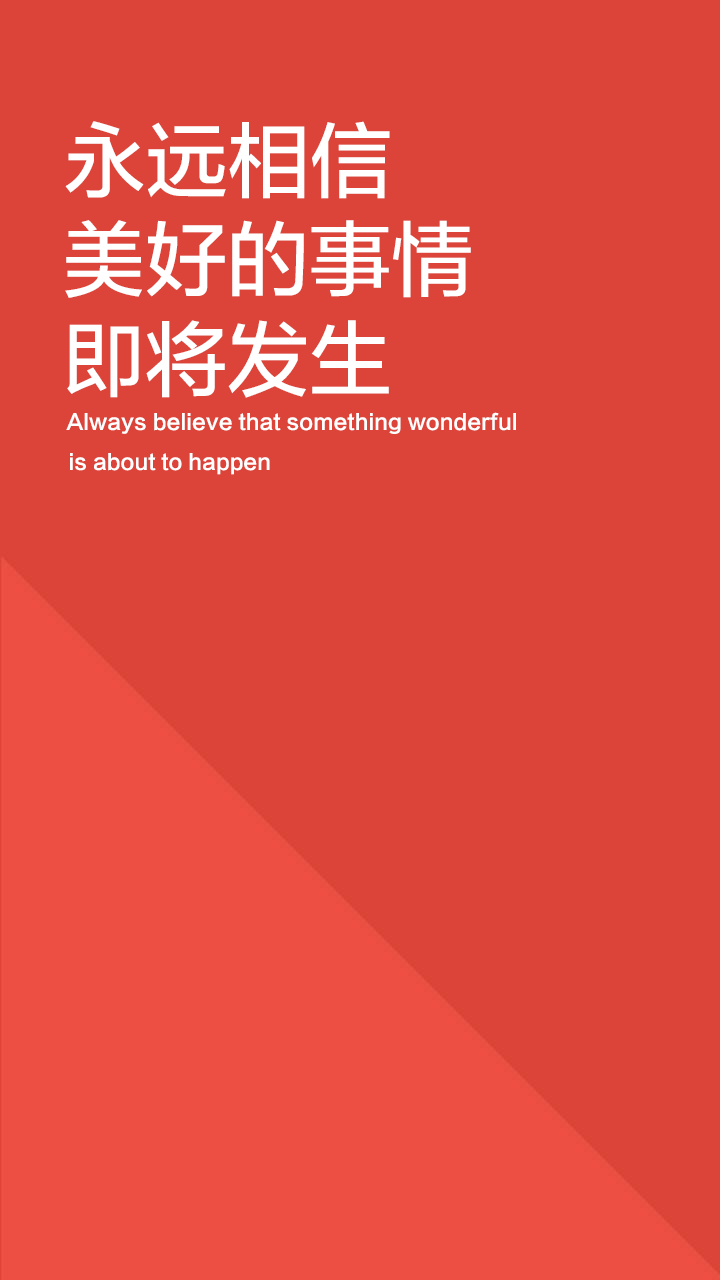
<style>
.page{position:relative;width:720px;height:1280px;background:#dc4439}
.page>*{position:absolute;margin:0}
.t1{font:82px "FZLTZHUNHK--GBK1-0";color:#ffffff}
.t2{font:21px "FZLTCHJW--GB1-0";color:#ffffff}
</style>
<div class="page">
<p class="t1" style="left:65px;top:121px;width:325px;height:78px">永远相信</p>
<p class="t1" style="left:65px;top:220px;width:406px;height:78px">美好的事情</p>
<p class="t1" style="left:67px;top:320px;width:322px;height:78px">即将发生</p>
<p class="t2" style="left:66px;top:412px;width:450px;height:22px">Always believe that something wonderful</p>
<p class="t2" style="left:70px;top:453px;width:200px;height:22px">is about to happen</p>
</div>
